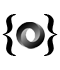
<style>
.page{position:relative;width:60px;height:70px;background:#ffffff}
.page>*{position:absolute;margin:0}
.t1{font:48px "ScriptMTBold";color:#000000}
</style>
<div class="page">
<p class="t1" style="left:2px;top:14px;width:56px;height:42px">{  }</p>
</div>
